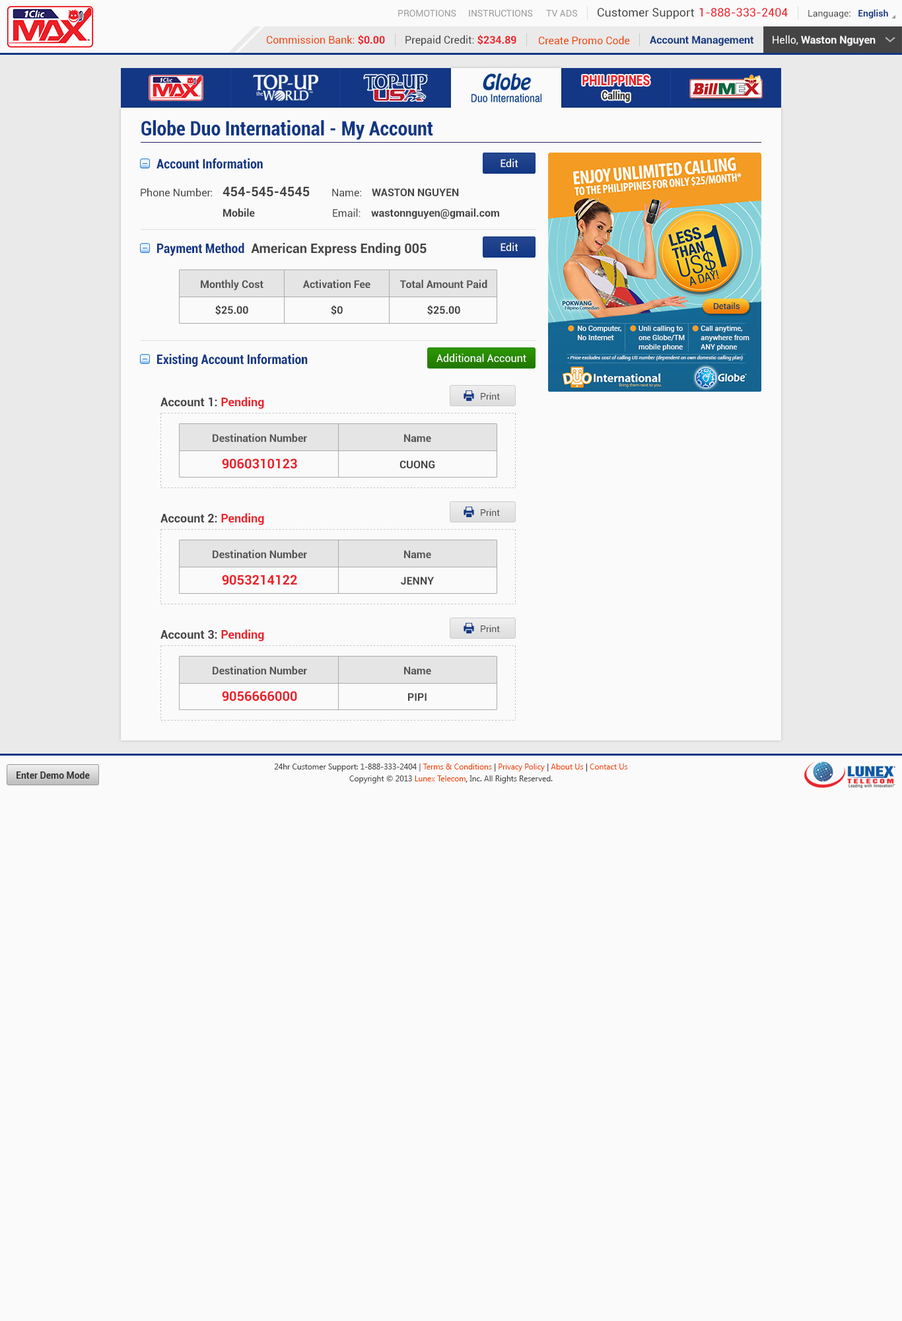
<style>
.page{position:relative;width:902px;height:1321px;background:#fafafa}
.page>*{position:absolute;margin:0}
.t1{font:9.2px "Roboto-Regular";color:#999999}
.t2{font:11.6px "Roboto-Regular";color:#444444}
.t3{font:11.6px "Roboto-Regular";color:#ec2029}
.t4{font:9.2px "Roboto-Regular";color:#444444}
.t5{font:9.2px "Roboto-Bold";color:#123785}
.t6{font:10.6px "Roboto-Regular";color:#ee4400}
.t7{font:10.6px "Roboto-Bold";color:#ec2028}
.t8{font:10.6px "Roboto-Regular";color:#444444}
.t9{font:10.6px "Roboto-Bold";color:#123785}
.t10{font:10.6px "Roboto-Bold";color:#fafafa}
.t11{font:10.6px "Roboto-Regular";color:#fafafa}
.t12{font:14.1px "Roboto-Black";color:#ec2028;scale:0.81 1}
.t13{font:11.3px "Roboto-Black";color:#333333;scale:0.81 1}
.t14{font:19.8px "Roboto-BoldCondensed";color:#123785}
.t15{font:13.2px "Roboto-BoldCondensed";color:#123785}
.t16{font:10.6px "Roboto-Regular";color:#ffffff}
.t17{font:13.2px "Roboto-Bold";color:#444444}
.t18{font:10.6px "Roboto-Bold";color:#444444}
.t19{font:10.6px "Roboto-Bold";color:#555555}
.t20{font:11.9px "Roboto-Bold";color:#444444}
.t21{font:11.9px "Roboto-Bold";color:#ec222a}
.t22{font:13.2px "Roboto-Bold";color:#ec2028}
.t23{font:9.2px "Roboto-Bold";color:#333333}
.t24{font:7.9px/11.9px "SegoeUI";color:#444444}
.t25{font:7.9px/11.9px "SegoeUI";color:#ee4400}
.t26{font:7.9px/11.9px "SegoeUI";color:#333333}
</style>
<div class="page">
<p class="t1" style="left:398px;top:10px;width:59px;height:7px">PROMOTIONS</p>
<p class="t1" style="left:469px;top:10px;width:64px;height:7px">INSTRUCTIONS</p>
<p class="t1" style="left:546px;top:10px;width:31px;height:7px">TV ADS</p>
<p class="t2" style="left:598px;top:8px;width:96px;height:11px">Customer Support</p>
<p class="t3" style="left:700px;top:8px;width:88px;height:9px">1-888-333-2404</p>
<p class="t4" style="left:809px;top:9px;width:80px;height:9px">Language:   <span class="t5">English</span></p>
<p class="t6" style="left:267px;top:35px;width:118px;height:10px">Commission Bank: <span class="t7">$0.00</span></p>
<p class="t8" style="left:406px;top:35px;width:111px;height:11px">Prepaid Credit: <span class="t7">$234.89</span></p>
<p class="t6" style="left:539px;top:36px;width:91px;height:9px">Create Promo Code</p>
<p class="t9" style="left:650px;top:36px;width:104px;height:10px">Account Management</p>
<p class="t10" style="left:773px;top:35px;width:103px;height:11px"><span class="t11">Hello, </span>Waston Nguyen</p>
<p class="t12" style="left:583px;top:75px;width:67px;height:11px">PHILIPPINES</p>
<p class="t13" style="left:603px;top:91px;width:27px;height:11px">Calling</p>
<p class="t14" style="left:141px;top:120px;width:292px;height:20px">Globe Duo International - My Account</p>
<p class="t15" style="left:157px;top:158px;width:106px;height:11px">Account Information</p>
<p class="t16" style="left:501px;top:159px;width:18px;height:8px">Edit</p>
<p class="t8" style="left:141px;top:188px;width:71px;height:9px">Phone Number:</p>
<p class="t17" style="left:223px;top:186px;width:87px;height:11px">454-545-4545</p>
<p class="t8" style="left:332px;top:188px;width:29px;height:9px">Name:</p>
<p class="t18" style="left:372px;top:188px;width:87px;height:8px">WASTON NGUYEN</p>
<p class="t18" style="left:223px;top:208px;width:32px;height:9px">Mobile</p>
<p class="t8" style="left:333px;top:208px;width:28px;height:9px">Email:</p>
<p class="t18" style="left:371px;top:208px;width:128px;height:11px">wastonnguyen@gmail.com</p>
<p class="t17" style="left:157px;top:242px;width:270px;height:14px"><span class="t15">Payment Method</span>  American Express Ending 005</p>
<p class="t16" style="left:501px;top:242px;width:18px;height:9px">Edit</p>
<p class="t19" style="left:201px;top:279px;width:63px;height:12px">Monthly Cost</p>
<p class="t19" style="left:303px;top:279px;width:68px;height:10px">Activation Fee</p>
<p class="t19" style="left:400px;top:279px;width:88px;height:10px">Total Amount Paid</p>
<p class="t18" style="left:215px;top:305px;width:33px;height:10px">$25.00</p>
<p class="t18" style="left:331px;top:305px;width:12px;height:10px">$0</p>
<p class="t18" style="left:427px;top:305px;width:33px;height:10px">$25.00</p>
<p class="t15" style="left:157px;top:353px;width:151px;height:14px">Existing Account Information</p>
<p class="t16" style="left:437px;top:353px;width:90px;height:10px">Additional Account</p>
<p class="t20" style="left:161px;top:397px;width:103px;height:12px">Account 1: <span class="t21">Pending</span></p>
<p class="t4" style="left:481px;top:392px;width:19px;height:8px">Print</p>
<p class="t19" style="left:213px;top:433px;width:94px;height:10px">Destination Number</p>
<p class="t19" style="left:404px;top:434px;width:27px;height:9px">Name</p>
<p class="t22" style="left:222px;top:458px;width:75px;height:11px">9060310123</p>
<p class="t18" style="left:400px;top:460px;width:35px;height:8px">CUONG</p>
<p class="t4" style="left:481px;top:509px;width:19px;height:7px">Print</p>
<p class="t20" style="left:161px;top:513px;width:103px;height:12px">Account 2: <span class="t21">Pending</span></p>
<p class="t19" style="left:213px;top:550px;width:94px;height:9px">Destination Number</p>
<p class="t19" style="left:404px;top:550px;width:27px;height:9px">Name</p>
<p class="t22" style="left:222px;top:575px;width:75px;height:10px">9053214122</p>
<p class="t18" style="left:401px;top:577px;width:33px;height:8px">JENNY</p>
<p class="t20" style="left:161px;top:630px;width:103px;height:11px">Account 3: <span class="t21">Pending</span></p>
<p class="t4" style="left:481px;top:625px;width:19px;height:7px">Print</p>
<p class="t19" style="left:213px;top:666px;width:94px;height:9px">Destination Number</p>
<p class="t19" style="left:404px;top:667px;width:27px;height:8px">Name</p>
<p class="t22" style="left:222px;top:691px;width:75px;height:11px">9056666000</p>
<p class="t18" style="left:408px;top:693px;width:19px;height:8px">PIPI</p>
<p class="t23" style="left:17px;top:772px;width:73px;height:7px">Enter Demo Mode</p>
<p class="t24" style="left:274px;top:764px;width:354px;height:20px;text-align:center">24hr Customer Support: 1-888-333-2404 | <span class="t25">Terms &amp; Conditions</span><span class="t26"> | </span><span class="t25">Privacy Policy</span><span class="t26"> | </span><span class="t25">About Us</span><span class="t26"> | </span><span class="t25">Contact Us<br></span>Copyright © 2013 <span class="t25">Lunex Telecom</span><span class="t26">,</span> Inc. All Rights Reserved.</p>
</div>
